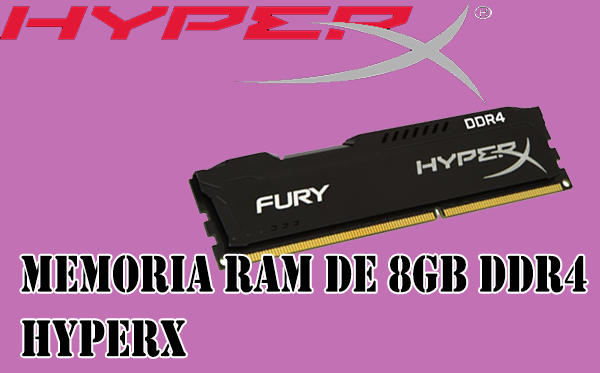
<style>
.page{position:relative;width:600px;height:373px;background:#c271b4}
.page>*{position:absolute;margin:0}
.t1{font:53.7px "Stencil";color:#000000;scale:0.8 1}
</style>
<div class="page">
<p class="t1" style="left:21px;top:255px;width:566px;height:102px">MEMORIA RAM DE 8GB DDR4 <br>HYPERX</p>
</div>
